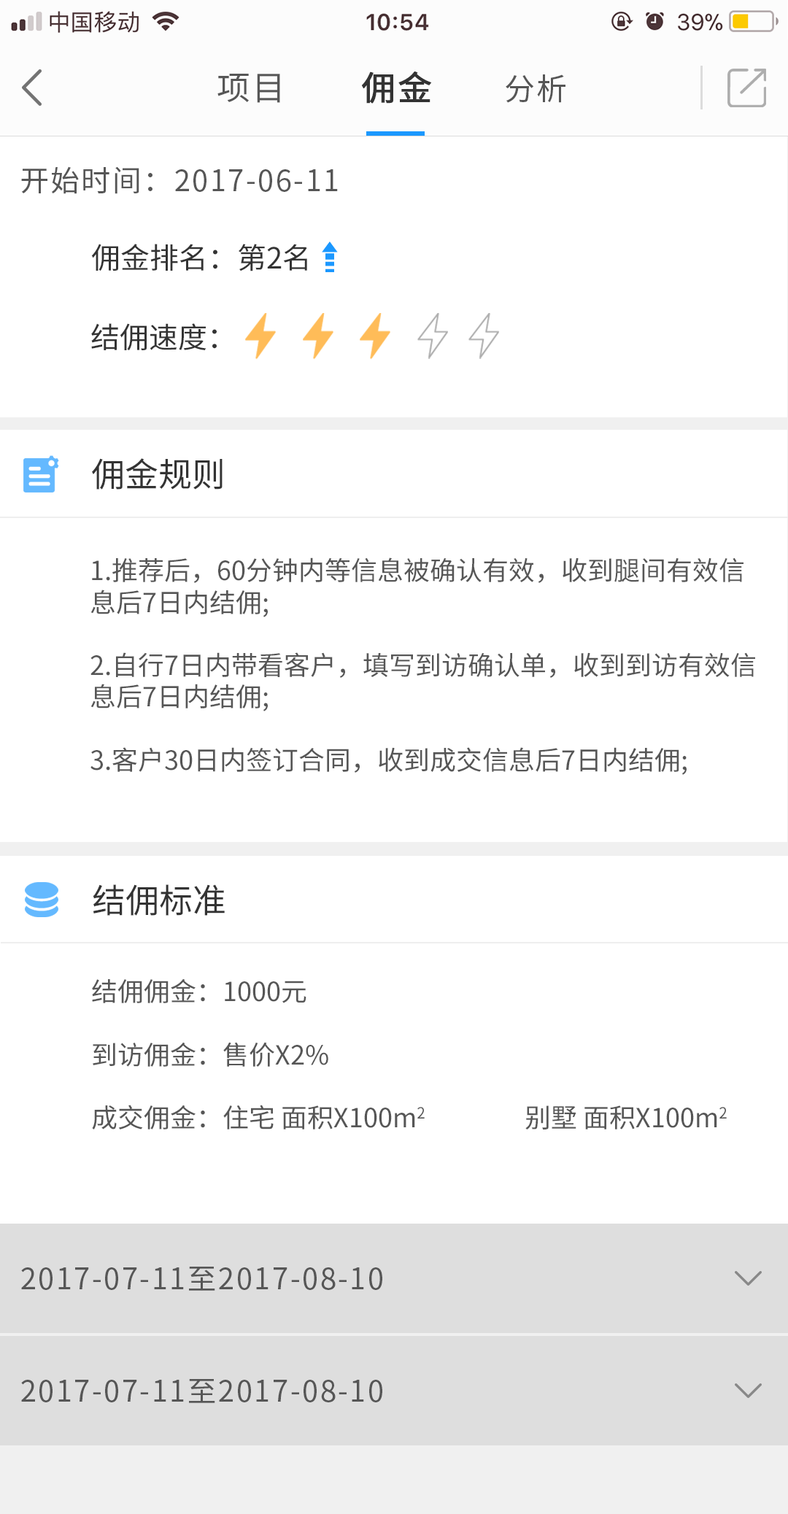
<style>
.page{position:relative;width:788px;height:1514px;background:#ffffff}
.page>*{position:absolute;margin:0}
.t1{font:33.6px "SourceHanSansCN-Regular";letter-spacing:0.06em;color:#565656}
.t2{font:33.6px "SourceHanSansCN-Regular";letter-spacing:0.06em;color:#333333;font-weight:bold}
.t3{font:30.6px "SourceHanSansCN-Regular";letter-spacing:0.06em;color:#565656}
.t4{font:29.2px "SourceHanSansCN-Regular";letter-spacing:0.06em;color:#565656}
.t5{font:29.2px "SourceHanSansCN-Regular";color:#333333}
.t6{font:33.6px "SourceHanSansCN-Regular";color:#333333}
.t7{font:26.3px "SourceHanSansCN-Regular";color:#565656}
</style>
<div class="page">
<p class="t1" style="left:217px;top:74px;width:63px;height:29px">项目</p>
<p class="t2" style="left:362px;top:71px;width:69px;height:33px">佣金</p>
<p class="t3" style="left:506px;top:74px;width:59px;height:29px">分析</p>
<p class="t4" style="left:21px;top:166px;width:317px;height:28px">开始时间：2017-06-11</p>
<p class="t5" style="left:91px;top:244px;width:216px;height:27px">佣金排名：第2名</p>
<p class="t5" style="left:91px;top:323px;width:126px;height:28px">结佣速度：</p>
<p class="t6" style="left:92px;top:458px;width:130px;height:31px">佣金规则</p>
<p class="t7" style="left:90px;top:557px;width:665px;height:218px">1.推荐后，60分钟内等信息被确认有效，收到腿间有效信息后7日内结佣;<br><br>2.自行7日内带看客户，填写到访确认单，收到到访有效信息后7日内结佣;<br><br>3.客户30日内签订合同，收到成交信息后7日内结佣;</p>
<p class="t6" style="left:93px;top:884px;width:132px;height:31px">结佣标准</p>
<p class="t7" style="left:92px;top:978px;width:635px;height:151px">结佣佣金：1000元<br><br>到访佣金：售价X2%<br><br>成交佣金：住宅 面积X100m2                             别墅 面积X100m2</p>
<p class="t4" style="left:21px;top:1266px;width:361px;height:24px">2017-07-11至2017-08-10</p>
<p class="t4" style="left:21px;top:1379px;width:361px;height:24px">2017-07-11至2017-08-10</p>
</div>
